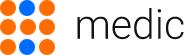
<style>
.page{position:relative;width:186px;height:55px;background:#ffffff}
.page>*{position:absolute;margin:0}
.t1{font:41px "Roboto-Light";color:#141414}
</style>
<div class="page">
<p class="t1" style="left:77px;top:8px;width:107px;height:32px">medic</p>
</div>
